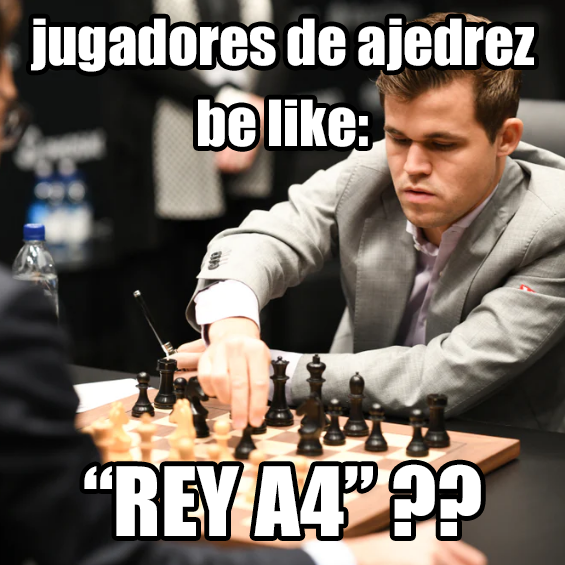
<style>
.page{position:relative;width:565px;height:565px}
.page>*{position:absolute;margin:0}
.t1{font:58.5px "Impact";color:#ffffff}
.t2{font:88.2px "Impact";color:#ffffff}
</style>
<div class="page">
<p class="t1" style="left:31px;top:18px;width:503px;height:129px;text-align:center">jugadores de ajedrez<br>be like:</p>
<p class="t2" style="left:84px;top:464px;width:397px;height:72px">“REY A4” ??</p>
</div>
